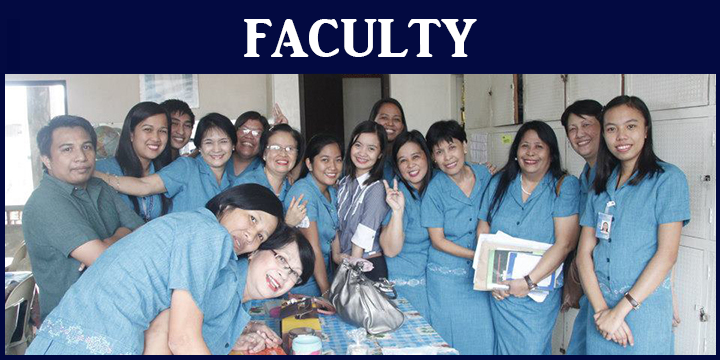
<style>
.page{position:relative;width:720px;height:360px}
.page>*{position:absolute;margin:0}
.t1{font:56px "ARJULIAN";color:#ffffff}
</style>
<div class="page">
<p class="t1" style="left:244px;top:19px;width:233px;height:38px">FACULTY</p>
</div>
